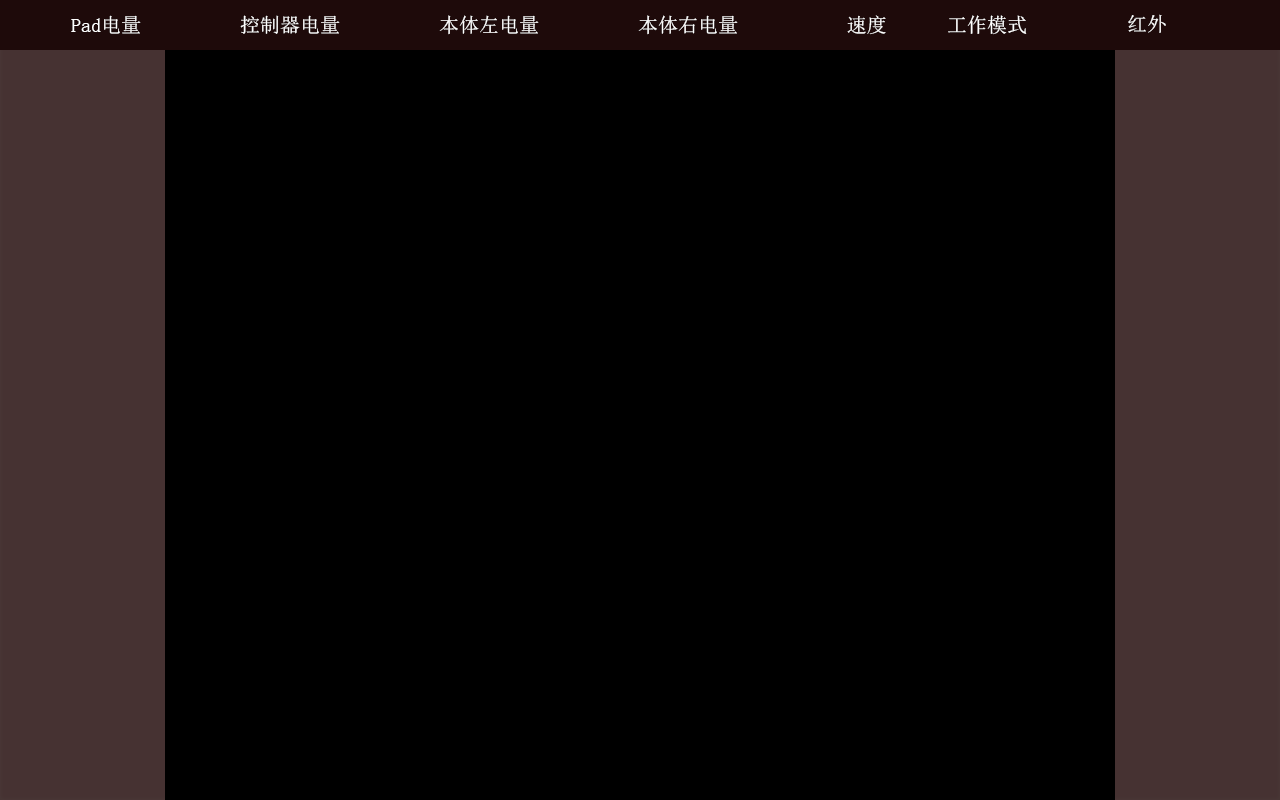
<style>
.page{position:relative;width:1280px;height:800px;background:#000000}
.page>*{position:absolute;margin:0}
.t1{font:20px "SimSun";color:#ffffff}
</style>
<div class="page">
<p class="t1" style="left:71px;top:15px;width:70px;height:19px">Pad电量</p>
<p class="t1" style="left:240px;top:15px;width:100px;height:19px">控制器电量</p>
<p class="t1" style="left:439px;top:15px;width:100px;height:20px">本体左电量</p>
<p class="t1" style="left:638px;top:15px;width:100px;height:20px">本体右电量</p>
<p class="t1" style="left:847px;top:15px;width:39px;height:20px">速度</p>
<p class="t1" style="left:948px;top:15px;width:79px;height:20px">工作模式</p>
<p class="t1" style="left:1128px;top:14px;width:38px;height:19px">红外</p>
</div>
